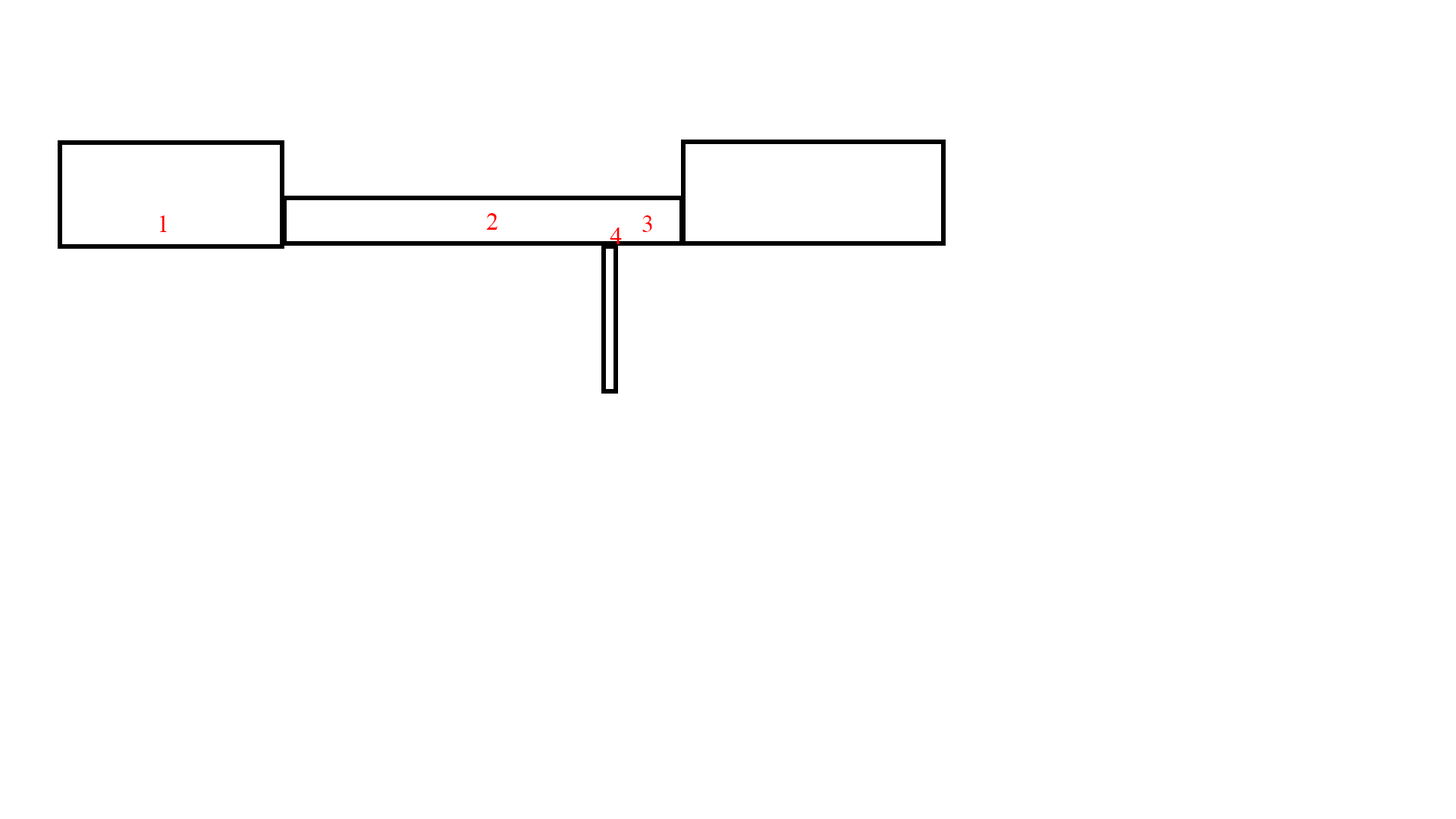
<style>
.page{position:relative;width:1456px;height:819px;background:#ffffff}
.page>*{position:absolute;margin:0}
.t1{font:25.3px "TimesNewRomanPSMT";letter-spacing:-0.01em;color:#ff0000}
</style>
<div class="page">
<p class="t1" style="left:160px;top:215px;width:7px;height:17px">1</p>
<p class="t1" style="left:486px;top:213px;width:12px;height:17px">2</p>
<p class="t1" style="left:642px;top:215px;width:10px;height:17px">3</p>
<p class="t1" style="left:610px;top:227px;width:12px;height:17px">4</p>
</div>
